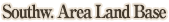
<style>
.page{position:relative;width:169px;height:22px;background:#ffffff}
.page>*{position:absolute;margin:0}
.t1{font:18px "RyuminPro-ExBold";letter-spacing:-0.08em;color:#534738;scale:0.9 1}
</style>
<div class="page">
<p class="t1" style="left:2px;top:4px;width:164px;height:15px">Southw. Area Land Base</p>
</div>
